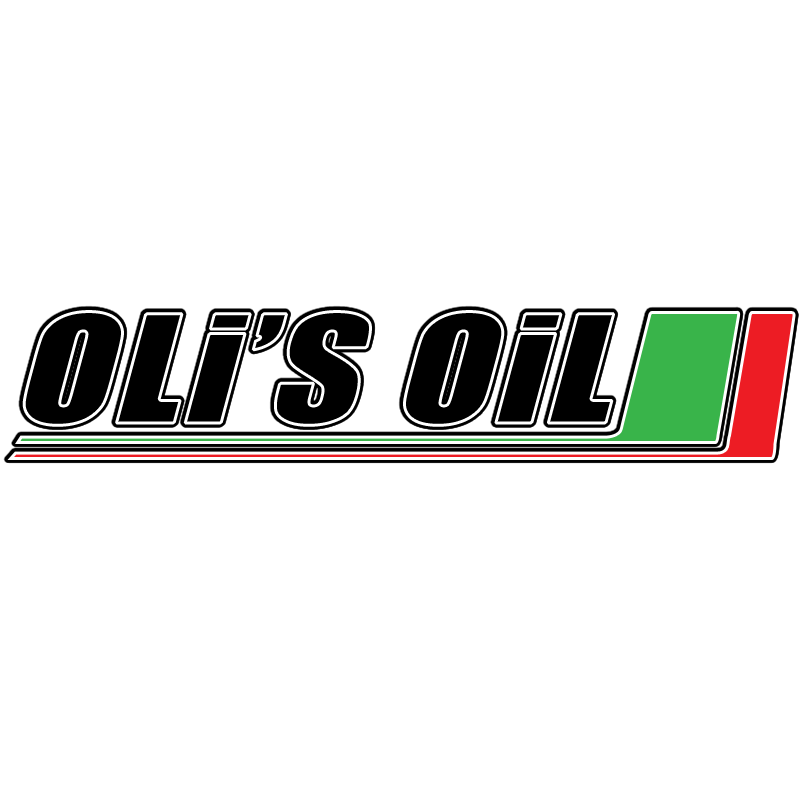
<style>
.page{position:relative;width:800px;height:800px;background:#ffffff}
.page>*{position:absolute;margin:0}
.t1{font:141.6px "Impact";color:#000000;font-weight:bold;scale:1.21 1}
</style>
<div class="page">
<p class="t1" style="left:22px;top:310px;width:593px;height:117px">OLi’S OiL</p>
</div>
